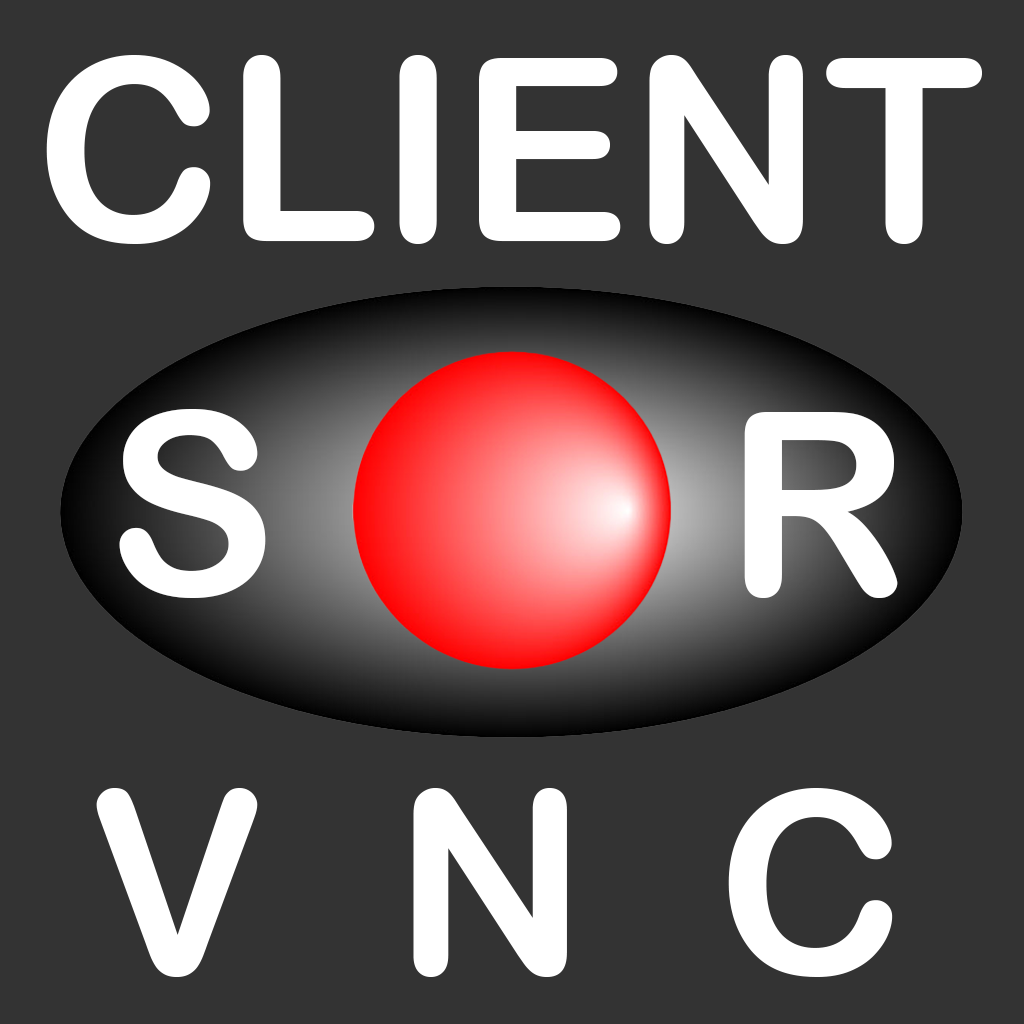
<style>
.page{position:relative;width:1024px;height:1024px;background:#333333}
.page>*{position:absolute;margin:0}
.t1{font:256px "ArialRoundedMTBold";color:#ffffff}
</style>
<div class="page">
<p class="t1" style="left:46px;top:55px;width:936px;height:189px">CLIENT</p>
<p class="t1" style="left:119px;top:409px;width:779px;height:189px">S       R</p>
<p class="t1" style="left:96px;top:788px;width:797px;height:189px">V  N  C</p>
</div>
